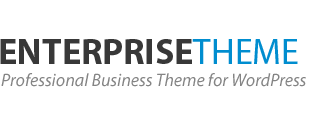
<style>
.page{position:relative;width:310px;height:125px;background:#ffffff}
.page>*{position:absolute;margin:0}
.t1{font:35.9px "MyriadPro-Bold";color:#383838}
.t2{font:35.9px "MyriadPro-Regular";color:#008dcf}
.t3{font:18px "MyriadPro-It";color:#848484}
</style>
<div class="page">
<p class="t1" style="left:0px;top:39px;width:298px;height:25px">ENTERPRISE<span class="t2">THEME</span></p>
<p class="t3" style="left:1px;top:73px;width:305px;height:14px">Professional Business Theme for WordPress</p>
</div>
